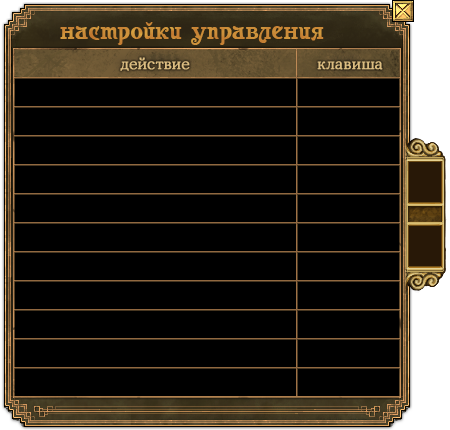
<style>
.page{position:relative;width:450px;height:430px;background:#000000}
.page>*{position:absolute;margin:0}
.t1{font:26px "Casanova";letter-spacing:0.01em;color:#c78335}
.t2{font:15px "CooperLightCBT";letter-spacing:0.01em;color:#dcbd81;font-weight:bold}
</style>
<div class="page">
<p class="t1" style="left:60px;top:22px;width:264px;height:23px">настройки управления</p>
<p class="t2" style="left:120px;top:57px;width:70px;height:14px">действие</p>
<p class="t2" style="left:317px;top:61px;width:66px;height:9px">клавиша</p>
</div>
